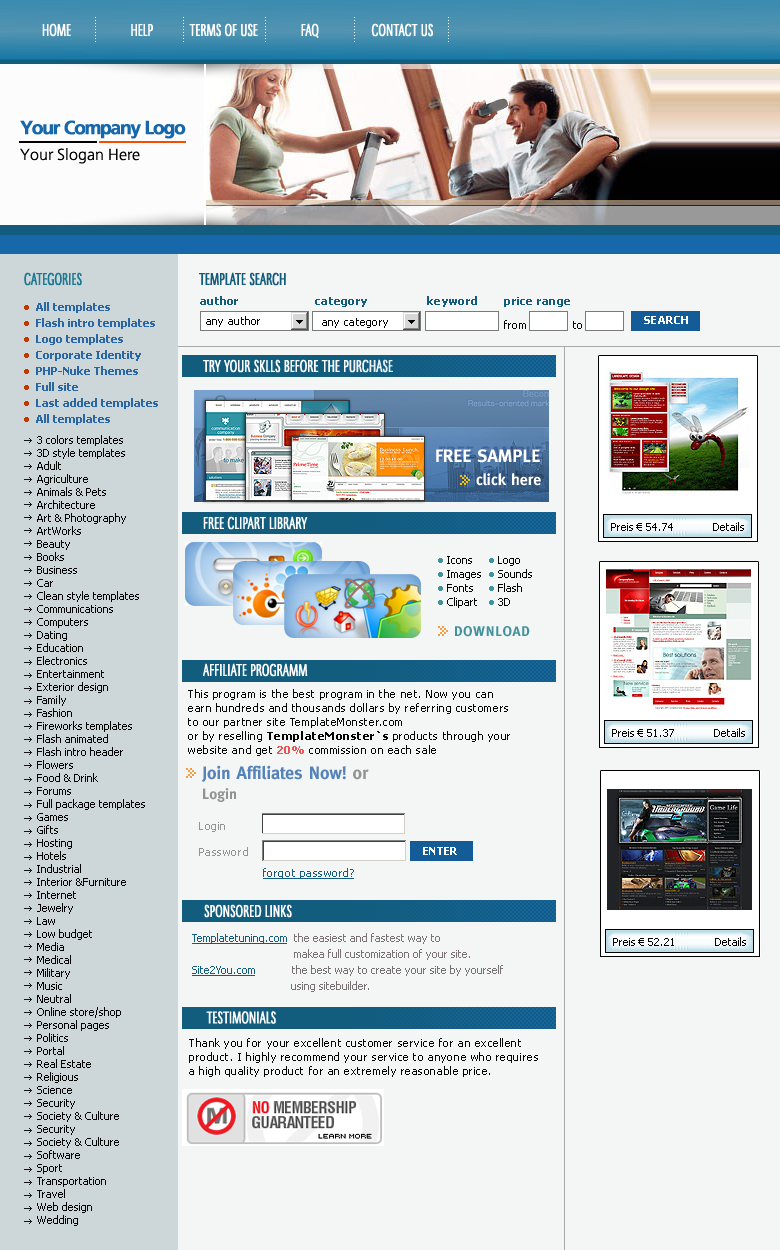
<style>
.page{position:relative;width:780px;height:1250px;background:#f4f5f5}
.page>*{position:absolute;margin:0}
.t1{font:18px "MaximaCyrTCY-LighComp";color:#ffffff}
.t2{font:19px/26px "AGForeignerLightBoldBold";letter-spacing:-0.08em;color:#1767ab;font-weight:bold}
.t3{font:16px/26px "AGForeignerLightPlainMedium";color:#000000}
.t4{font:18px "MaximaCyrTCY-LighComp";color:#1d7892}
.t5{font:18px "MaximaCyrTCY-LighComp";color:#125c7d}
.t6{font:11px/16px "Tahoma-Bold";color:#2967a4}
.t7{font:11px/16px "Tahoma-Bold";color:#ba3a01}
.t8{font:11px "Tahoma-Bold";letter-spacing:0.025em;color:#125c7d}
.t9{font:11px "Tahoma";letter-spacing:0.025em;color:#000000}
.t10{font:11px "Tahoma-Bold";letter-spacing:0.025em;color:#ffffff;text-transform:uppercase}
.t11{font:18px "MaximaCyrTCY-LighComp";color:#ffffff;text-transform:uppercase}
.t12{font:11px/13px "Tahoma";color:#030303}
.t13{font:11px/14px "Tahoma-Bold";color:#41929b}
.t14{font:11px/14px "Tahoma";color:#030303}
.t15{font:14px "MetaC-Bold";letter-spacing:0.05em;color:#41929b;text-transform:uppercase}
.t16{font:11px/14px "Tahoma";letter-spacing:0.05em;color:#020202}
.t17{font:11px/14px "Tahoma-Bold";letter-spacing:0.05em;color:#020202}
.t18{font:11px/14px "Tahoma-Bold";letter-spacing:0.05em;color:#ee5353}
.t19{font:18px/20px "MetaC-Bold";color:#5383b8}
.t20{font:18px/20px "MetaC-Bold";color:#929292}
.t21{font:15px/20px "MetaC-Bold";color:#929292}
.t22{font:11px/26px "Tahoma";letter-spacing:0.05em;color:#929292}
.t23{font:11px/14px "Tahoma";letter-spacing:0.05em;color:#929292}
.t24{font:11px "Tahoma";letter-spacing:0.05em;color:#125c7e}
.t25{font:11px/16px "Tahoma";color:#7b7373}
.t26{font:11px/16px "Tahoma";color:#125c7d}
.t27{font:11px/16px "Tahoma";color:#777171}
.t28{font:11px/14px "Tahoma";letter-spacing:0.05em;color:#000000}
</style>
<div class="page">
<p class="t1" style="left:42px;top:23px;width:391px;height:15px">HOME                  HELP           TERMS OF USE             FAQ                CONTACT US</p>
<p class="t2" style="left:20px;top:120px;width:166px;height:44px">Your Company Logo<br><span class="t3">Your Slogan Here</span></p>
<p class="t4" style="left:24px;top:272px;width:58px;height:14px">CATEGORIES</p>
<p class="t5" style="left:199px;top:272px;width:87px;height:14px">TEMPLATE SEARCH</p>
<p class="t6" style="left:24px;top:302px;width:134px;height:123px"><span class="t7">•</span>  All templates<br><span class="t7">•</span>  Flash intro templates<br><span class="t7">•</span>  Logo templates<br><span class="t7">•  </span>Corporate Identity<br><span class="t7">•  </span>PHP-Nuke Themes<br><span class="t7">•  </span>Full site<br><span class="t7">•  </span>Last added templates<br><span class="t7">•  </span>All templates</p>
<p class="t8" style="left:200px;top:296px;width:370px;height:11px">author                       category                  keyword        price range</p>
<p class="t9" style="left:206px;top:316px;width:54px;height:11px">any author</p>
<p class="t9" style="left:322px;top:318px;width:66px;height:10px">any category</p>
<p class="t10" style="left:644px;top:316px;width:44px;height:8px">search</p>
<p class="t9" style="left:504px;top:320px;width:78px;height:9px">from              to</p>
<p class="t11" style="left:203px;top:359px;width:190px;height:14px">try your sklls before the purchase</p>
<p class="t12" style="left:37px;top:435px;width:108px;height:791px">3 colors templates<br>3D style templates <br>Adult <br>Agriculture<br>Animals &amp; Pets<br>Architecture<br>Art &amp; Photography<br>ArtWorks<br>Beauty<br>Books<br>Business<br>Car<br>Clean style templates<br>Communications<br>Computers<br>Dating<br>Education<br>Electronics<br>Entertainment<br>Exterior design<br>Family<br>Fashion<br>Fireworks templates<br>Flash animated<br>Flash intro header<br>Flowers<br>Food &amp; Drink<br>Forums<br>Full package templates<br>Games<br>Gifts<br>Hosting<br>Hotels<br>Industrial<br>Interior &amp;Furniture<br>Internet<br>Jewelry<br>Law<br>Low budget<br>Media<br>Medical<br>Military<br>Music<br>Neutral<br>Online store/shop<br>Personal pages<br>Politics<br>Portal <br>Real Estate<br>Religious<br>Science<br>Security<br>Society &amp; Culture<br>Security<br>Society &amp; Culture<br>Software<br>Sport<br>Transportation <br>Travel<br>Web design<br>Wedding</p>
<p class="t11" style="left:203px;top:516px;width:105px;height:14px">free clipart library</p>
<p class="t12" style="left:438px;top:556px;width:43px;height:52px"><span class="t13">• </span><span class="t14">Icons<br></span><span class="t13">• </span><span class="t14">Images<br></span><span class="t13">• </span><span class="t14">Fonts<br></span><span class="t13">• </span><span class="t14">Clipart<br></span>Logo<br>Sounds<br>Flash<br>3D</p>
<p class="t14" style="left:489px;top:556px;width:43px;height:50px"><span class="t13">• </span>Logo<br><span class="t13">• </span>Sounds<br><span class="t13">• </span>Flash<br><span class="t13">• </span>3D</p>
<p class="t15" style="left:455px;top:626px;width:75px;height:11px">Download</p>
<p class="t11" style="left:203px;top:663px;width:105px;height:14px">affiliate programm</p>
<p class="t16" style="left:188px;top:689px;width:322px;height:67px">This program is the best program in the net. Now you can <br>earn hundreds and thousands dollars by referring customers <br>to our partner site TemplateMonster.com<br>or by reselling <span class="t17">TemplateMonster`s</span> products through your <br>website and get <span class="t18">20%</span> commission on each sale</p>
<p class="t19" style="left:201px;top:765px;width:168px;height:37px">Join Affiliates Now! <span class="t20">or<br></span><span class="t21">Login</span></p>
<p class="t22" style="left:199px;top:822px;width:49px;height:34px">Login<br>Passwor<span class="t23">d</span></p>
<p class="t10" style="left:423px;top:847px;width:34px;height:8px">enter</p>
<p class="t24" style="left:263px;top:868px;width:91px;height:11px">forgot password?</p>
<p class="t11" style="left:204px;top:904px;width:88px;height:14px">sponsored links</p>
<p class="t25" style="left:192px;top:933px;width:311px;height:59px"><span class="t26">Templatetuning.com </span> the easiest and fastest way to <br>                                  makea full customization of your site.<br><span class="t26">Site2You.com </span><span class="t27">           the best way to create your site by yourself <br>                                 using sitebuilder.</span></p>
<p class="t11" style="left:206px;top:1011px;width:70px;height:13px">TESTIMONIALS</p>
<p class="t28" style="left:189px;top:1038px;width:349px;height:39px">Thank you for your excellent customer service for an excellent<br>product. I highly recommend your service to anyone who requires<br>a high quality product for an extremely reasonable price.</p>
</div>
